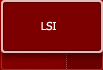
<style>
.page{position:relative;width:103px;height:70px;background:#7c0000}
.page>*{position:absolute;margin:0}
.t1{font:11px "Tahoma";color:#ffffff}
</style>
<div class="page">
<p class="t1" style="left:41px;top:21px;width:15px;height:10px">LSI</p>
</div>
